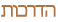
<style>
.page{position:relative;width:58px;height:22px;background:#ffffff}
.page>*{position:absolute;margin:0}
.t1{font:21.6px "MyriadHebrew-Regular";letter-spacing:-0.09em;color:#ad7344}
</style>
<div class="page">
<p class="t1" style="left:1px;top:4px;width:55px;height:13px">תוכרדה</p>
</div>
